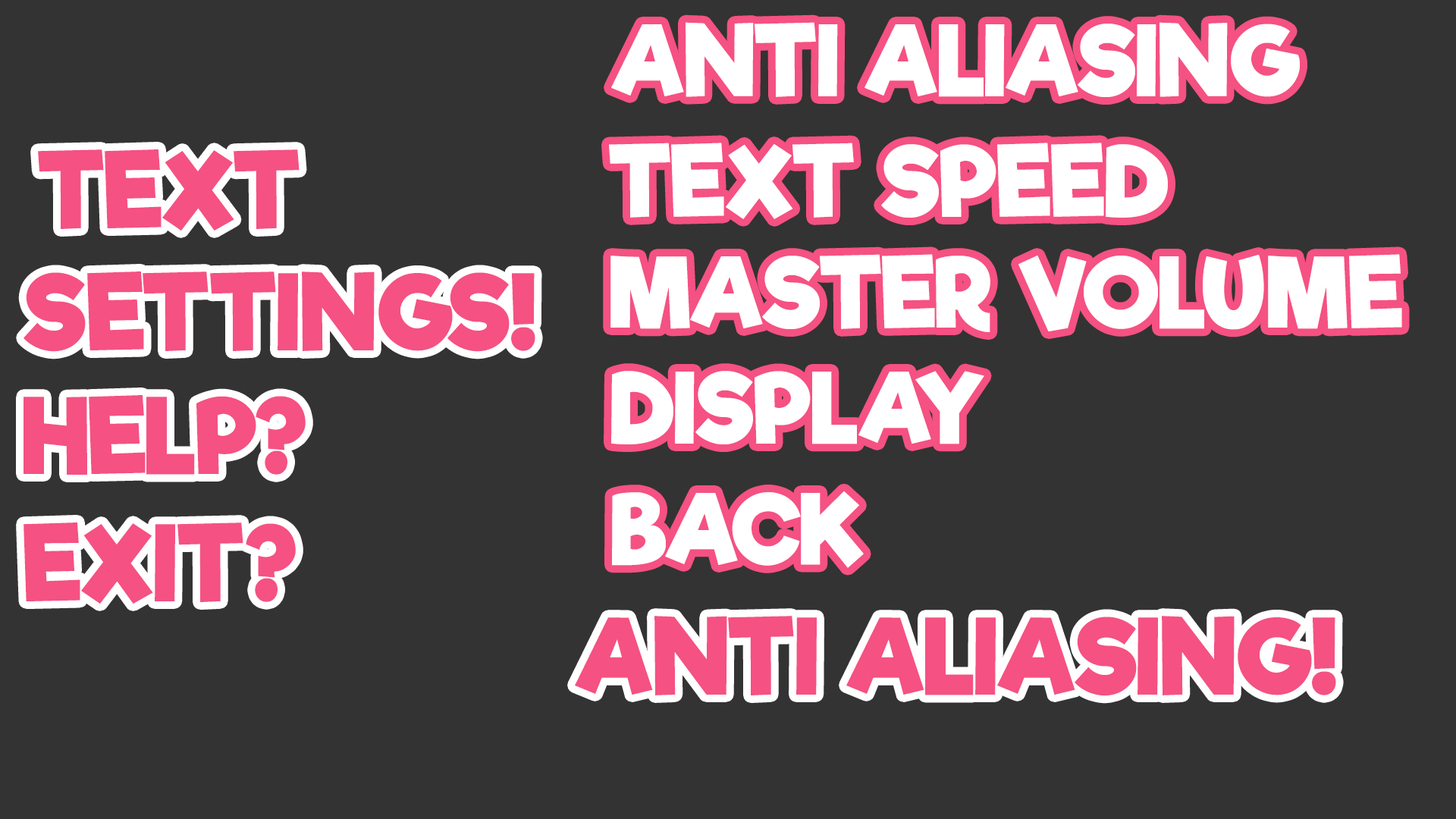
<style>
.page{position:relative;width:1456px;height:819px;background:#333333}
.page>*{position:absolute;margin:0}
.t1{font:94.8px "RifficFree-Bold";color:#ffffff;text-transform:uppercase}
.t2{font:101.4px "RifficFree-Bold";color:#f55183;text-transform:uppercase}
</style>
<div class="page">
<p class="t1" style="left:611px;top:22px;width:689px;height:75px">anti aliasing</p>
<p class="t2" style="left:38px;top:149px;width:262px;height:82px">Text</p>
<p class="t1" style="left:609px;top:143px;width:559px;height:76px">Text speed</p>
<p class="t1" style="left:610px;top:254px;width:792px;height:78px">Master Volume</p>
<p class="t2" style="left:24px;top:271px;width:511px;height:81px">settings!</p>
<p class="t1" style="left:611px;top:371px;width:373px;height:73px">Display</p>
<p class="t2" style="left:24px;top:395px;width:282px;height:80px">Help?</p>
<p class="t1" style="left:612px;top:491px;width:252px;height:77px">Back</p>
<p class="t2" style="left:24px;top:522px;width:272px;height:82px">Exit?</p>
<p class="t2" style="left:575px;top:616px;width:761px;height:80px">Anti Aliasing!</p>
</div>
